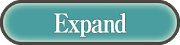
<style>
.page{position:relative;width:180px;height:45px;background:#4a9e9f}
.page>*{position:absolute;margin:0}
.t1{font:26px "RyuminPro-ExBold";letter-spacing:-0.08em;color:#ffffff;scale:0.9 1}
</style>
<div class="page">
<p class="t1" style="left:54px;top:13px;width:73px;height:24px">Expand</p>
</div>
